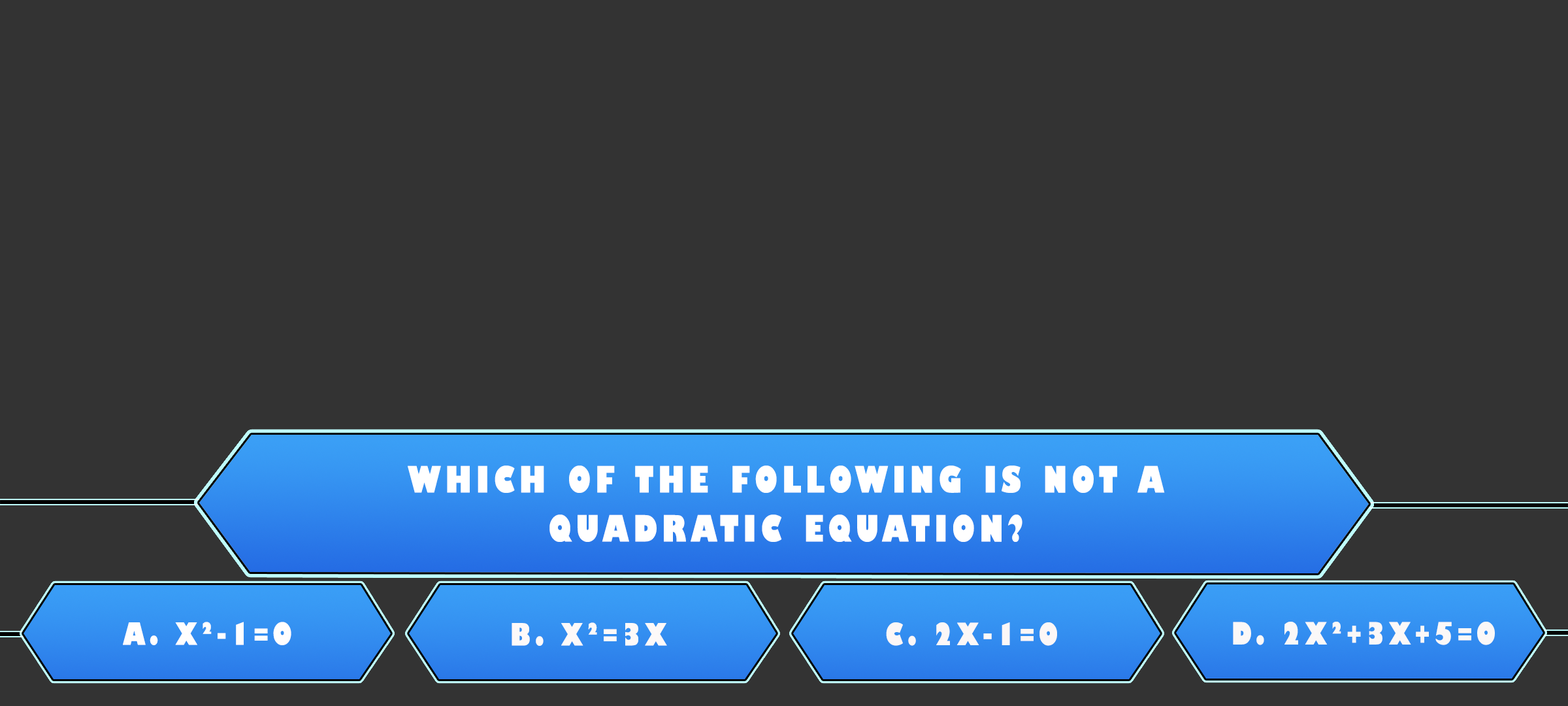
<style>
.page{position:relative;width:1568px;height:706px;background:#333333}
.page>*{position:absolute;margin:0}
.t1{font:35.4px/49px "GillSans-UltraBoldCondensed";letter-spacing:0.115em;color:#ffffff;text-transform:uppercase;scale:1.12 1}
.t2{font:29.9px "GillSans-UltraBoldCondensed";letter-spacing:0.115em;color:#fffefe;text-transform:uppercase;scale:1.12 1}
.t3{font:29.9px "GillSans-UltraBoldCondensed";letter-spacing:0.115em;color:#fdf9f9;text-transform:uppercase;scale:1.12 1}
.t4{font:29.9px "GillSans-UltraBoldCondensed";letter-spacing:0.115em;color:#fcf7f7;text-transform:uppercase;scale:1.12 1}
.t5{font:29.9px "GillSans-UltraBoldCondensed";letter-spacing:0.115em;color:#fbf8f8;text-transform:uppercase;scale:1.12 1}
</style>
<div class="page">
<p class="t1" style="left:408px;top:465px;width:757px;height:77px;text-align:center">Which of the following is not a<br>quadratic equation?</p>
<p class="t2" style="left:123px;top:621px;width:168px;height:24px">a. x²-1=0</p>
<p class="t3" style="left:512px;top:622px;width:155px;height:23px">b. x²=3x</p>
<p class="t4" style="left:886px;top:622px;width:171px;height:23px">c. 2x-1=0</p>
<p class="t5" style="left:1233px;top:621px;width:262px;height:24px">d. 2x²+3x+5=0</p>
</div>
